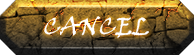
<style>
.page{position:relative;width:194px;height:55px}
.page>*{position:absolute;margin:0}
.t1{font:24px "VinerHandITC";color:#fefefe}
</style>
<div class="page">
<p class="t1" style="left:44px;top:16px;width:105px;height:22px">CANCEL</p>
</div>
